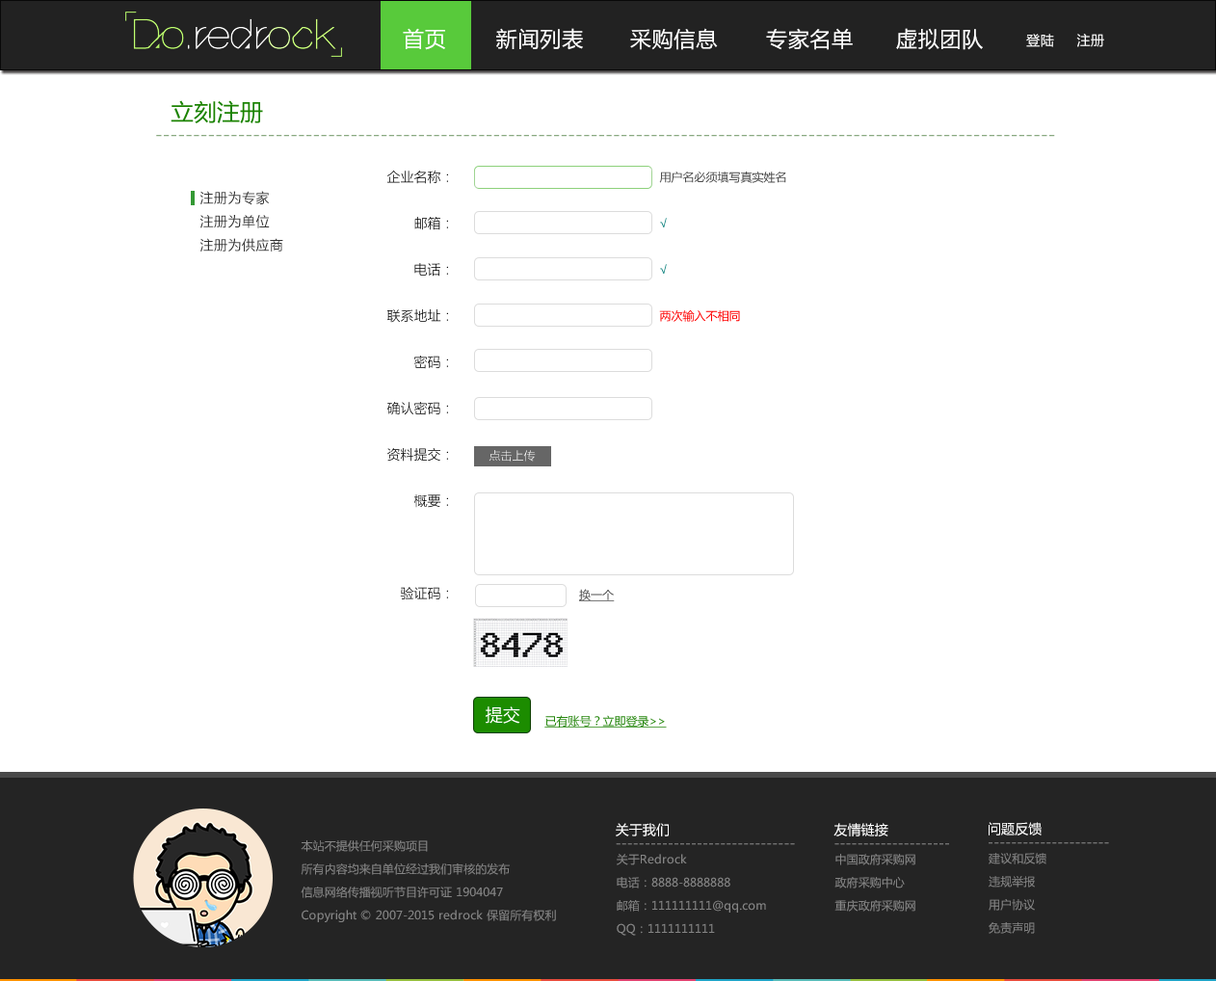
<style>
.page{position:relative;width:1216px;height:981px;background:#ffffff}
.page>*{position:absolute;margin:0}
.t1{font:21.2px "MicrosoftYaHei";letter-spacing:0.035em;color:#ffffff}
.t2{font:13.5px "MicrosoftYaHei";letter-spacing:0.035em;color:#ffffff}
.t3{font:23.1px "MicrosoftYaHeiUI";color:#1b8300}
.t4{font:17.3px "MicrosoftYaHeiUI";color:#89a981}
.t5{font:13.5px/46.2px "MicrosoftYaHeiUILight";color:#000000}
.t6{font:11.6px/46.2px "MicrosoftYaHeiUI";color:#4d4d4d}
.t7{font:11.6px/46.2px "MicrosoftYaHeiUI";color:#047d78}
.t8{font:11.6px/46.2px "MicrosoftYaHeiUI";color:#fe0000}
.t9{font:13.5px "MicrosoftYaHei";letter-spacing:0.035em;color:#333333}
.t10{font:11.6px "MicrosoftYaHeiUILight"}
.t11{font:11.6px "MicrosoftYaHeiUI";color:#4d4d4d;text-decoration:underline}
.t12{font:17.3px "MicrosoftYaHeiUI";color:#ffffff}
.t13{font:11.6px "MicrosoftYaHeiUI";color:#26870e;text-decoration:underline}
.t14{font:13.5px "MicrosoftYaHei";color:#ffffff}
.t15{font:11.6px/23.1px "MicrosoftYaHei";color:#858585}
.t16{font:13.5px "MicrosoftYaHei";color:#858585}
</style>
<div class="page">
<p class="t1" style="left:403px;top:28px;width:42px;height:22px">首页</p>
<p class="t1" style="left:496px;top:28px;width:87px;height:22px">新闻列表</p>
<p class="t1" style="left:630px;top:28px;width:88px;height:22px">采购信息</p>
<p class="t1" style="left:766px;top:28px;width:87px;height:22px">专家名单</p>
<p class="t1" style="left:896px;top:28px;width:87px;height:22px">虚拟团队</p>
<p class="t2" style="left:1026px;top:34px;width:78px;height:13px">登陆     注册</p>
<p class="t3" style="left:171px;top:100px;width:92px;height:23px">立刻注册</p>
<p class="t4" style="left:156px;top:135px;width:899px;height:2px">------------------------------------------------------------------------------------------------------------------------</p>
<p class="t5" style="left:386px;top:171px;width:62px;height:428px;text-align:right">企业名称：<br>邮箱：<br>电话：<br>联系地址：<br>密码：<br>确认密码：<br>资料提交：<br>概要：<br><br>验证码：</p>
<p class="t6" style="left:659px;top:171px;width:127px;height:151px">用户名必须填写真实姓名<br><span class="t7">√<br>√<br></span><span class="t8">两次输入不相同</span></p>
<p class="t9" style="left:199px;top:191px;width:84px;height:60px">注册为专家<br>注册为单位<br>注册为供应商</p>
<p class="t10" style="left:488px;top:450px;width:48px;height:11px">点击上传</p>
<p class="t11" style="left:579px;top:589px;width:36px;height:12px">换一个</p>
<p class="t12" style="left:486px;top:706px;width:34px;height:18px">提交</p>
<p class="t13" style="left:544px;top:715px;width:123px;height:12px">已有账号？立即登录&gt;&gt;</p>
<p class="t14" style="left:988px;top:822px;width:53px;height:13px">问题反馈</p>
<p class="t14" style="left:616px;top:823px;width:53px;height:13px">关于我们</p>
<p class="t14" style="left:833px;top:823px;width:55px;height:13px">友情链接</p>
<p class="t15" style="left:301px;top:840px;width:255px;height:82px">本站不提供任何采购项目<br>所有内容均来自单位经过我们审核的发布<br>信息网络传播视听节目许可证 1904047<br>Copyright © 2007-2015 redrock 保留所有权利</p>
<p class="t16" style="left:616px;top:843px;width:179px;height:2px">-------------------------------</p>
<p class="t16" style="left:834px;top:843px;width:115px;height:2px">--------------------</p>
<p class="t16" style="left:988px;top:842px;width:121px;height:2px">---------------------</p>
<p class="t15" style="left:617px;top:854px;width:149px;height:81px">关于Redrock<br>电话：8888-8888888<br>邮箱：111111111@qq.com<br>QQ：1111111111</p>
<p class="t15" style="left:834px;top:854px;width:81px;height:57px">中国政府采购网<br>政府采购中心<br>重庆政府采购网</p>
<p class="t15" style="left:988px;top:853px;width:58px;height:81px">建议和反馈<br>违规举报<br>用户协议<br>免责声明</p>
</div>
